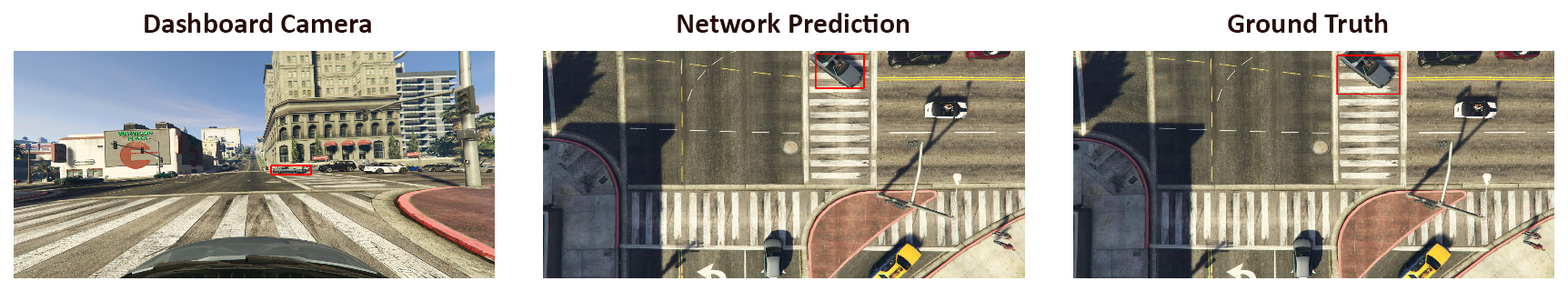
<style>
.page{position:relative;width:1568px;height:291px;background:#ffffff}
.page>*{position:absolute;margin:0}
.t1{font:29.1px "Calibri-Bold";color:#260d0a}
</style>
<div class="page">
<p class="t1" style="left:145px;top:13px;width:226px;height:20px">Dashboard Camera</p>
<p class="t1" style="left:678px;top:13px;width:232px;height:20px">Network Prediction</p>
<p class="t1" style="left:1228px;top:13px;width:160px;height:20px">Ground Truth</p>
</div>
